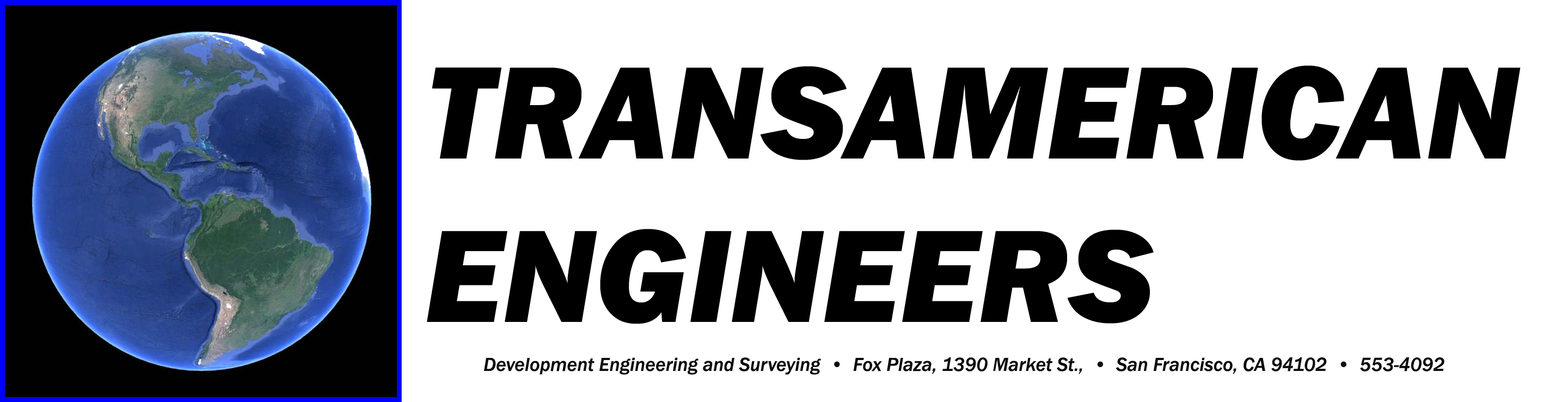
<style>
.page{position:relative;width:1568px;height:402px;background:#ffffff}
.page>*{position:absolute;margin:0}
.t1{font:136.1px "FranklinGothic-HeavyItalic";color:#000000}
.t2{font:19.6px "FranklinGothic-MediumItalic";color:#0a0a0a}
</style>
<div class="page">
<p class="t1" style="left:427px;top:65px;width:1094px;height:259px">TRANSAMERICAN<br>ENGINEERS</p>
<p class="t2" style="left:484px;top:357px;width:960px;height:18px">Development Engineering and Surveying  •  Fox Plaza, 1390 Market St.,  •  San Francisco, CA 94102  •  553-4092</p>
</div>
